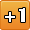
<style>
.page{position:relative;width:30px;height:30px}
.page>*{position:absolute;margin:0}
.t1{font:18.7px "AdLibBT-Regular";letter-spacing:-0.1em;color:#ffffff;font-variant:small-caps}
</style>
<div class="page">
<p class="t1" style="left:5px;top:8px;width:20px;height:14px">+1</p>
</div>
